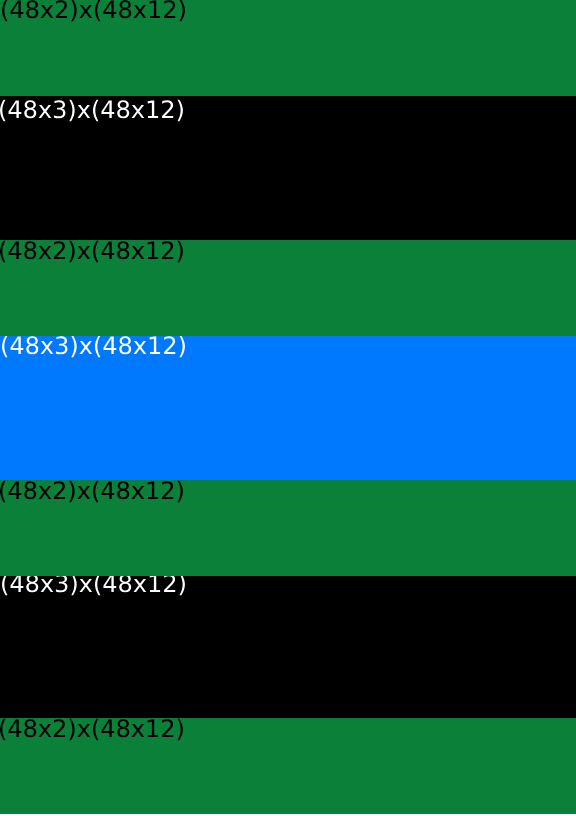
<style>
.page{position:relative;width:576px;height:816px;background:#0a8039}
.page>*{position:absolute;margin:0}
.t1{font:24px "DejaVuSans";color:#000000}
.t2{font:24px "DejaVuSans";color:#ffffff}
</style>
<div class="page">
<p class="t1" style="left:2px;top:0px;width:183px;height:22px">(48x2)x(48x12)</p>
<p class="t2" style="left:0px;top:99px;width:183px;height:23px">(48x3)x(48x12)</p>
<p class="t1" style="left:0px;top:240px;width:183px;height:23px">(48x2)x(48x12)</p>
<p class="t2" style="left:2px;top:335px;width:183px;height:23px">(48x3)x(48x12)</p>
<p class="t1" style="left:0px;top:480px;width:183px;height:23px">(48x2)x(48x12)</p>
<p class="t2" style="left:2px;top:573px;width:183px;height:23px">(48x3)x(48x12)</p>
<p class="t1" style="left:0px;top:718px;width:183px;height:23px">(48x2)x(48x12)</p>
</div>
